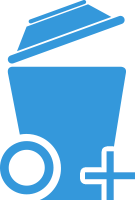
<style>
.page{position:relative;width:139px;height:208px;background:#3498db}
.page>*{position:absolute;margin:0}
.t1{font:104px "Pasajero";color:#3498db}
</style>
<div class="page">
<p class="t1" style="left:85px;top:151px;width:50px;height:49px">+</p>
</div>
